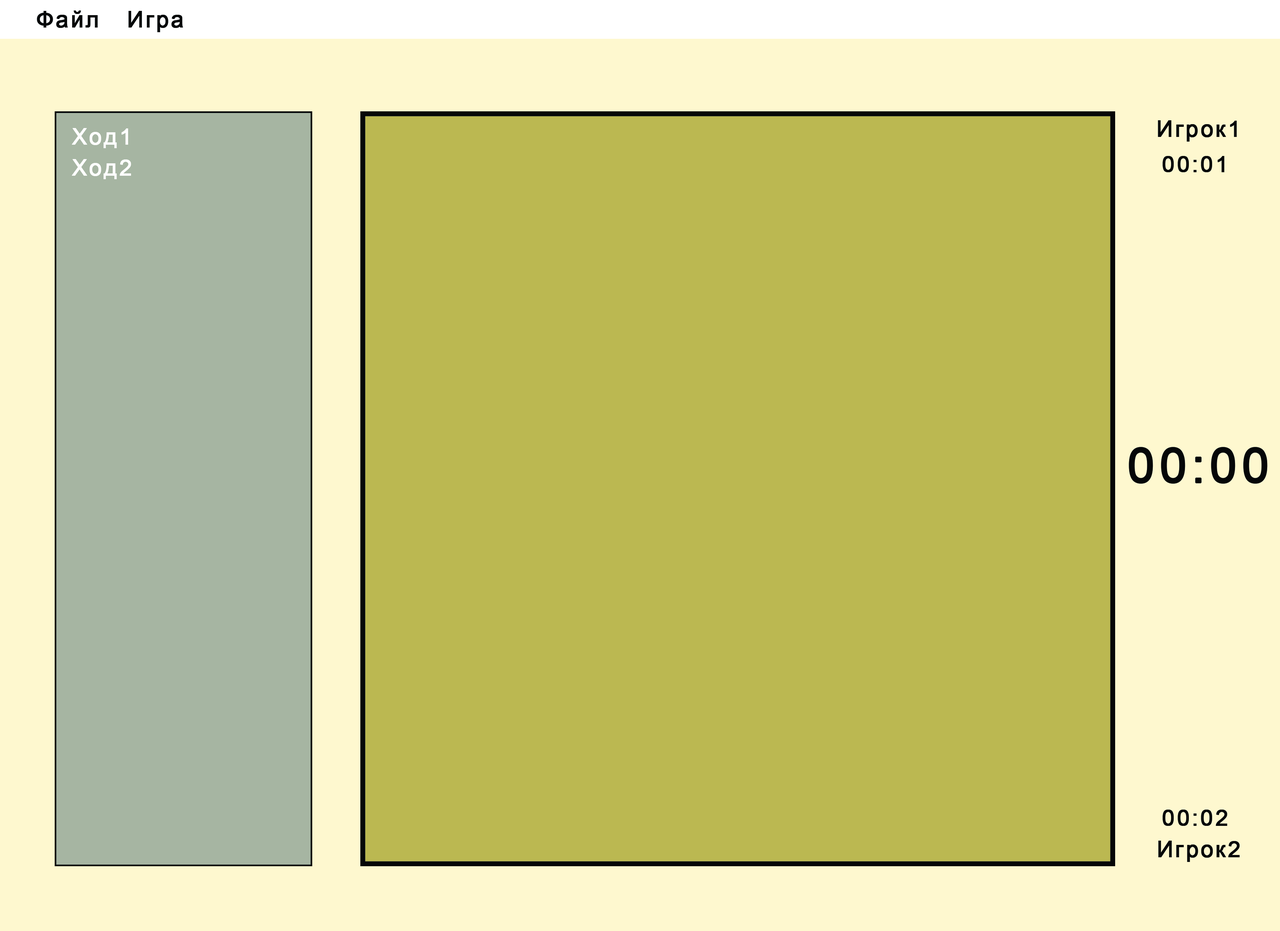
<style>
.page{position:relative;width:1280px;height:931px;background:#bbb851}
.page>*{position:absolute;margin:0}
.t1{font:22.6px "ArialMT";letter-spacing:0.075em;color:#050708;font-weight:bold}
.t2{font:22.6px "ArialMT";letter-spacing:0.075em;color:#ffffff;font-weight:bold}
.t3{font:48.5px "ArialMT";letter-spacing:0.075em;color:#050708;font-weight:bold}
</style>
<div class="page">
<p class="t1" style="left:37px;top:10px;width:146px;height:22px">Файл   Игра</p>
<p class="t1" style="left:1158px;top:120px;width:79px;height:22px">Игрок1</p>
<p class="t2" style="left:72px;top:128px;width:56px;height:20px">Ход1</p>
<p class="t2" style="left:72px;top:159px;width:59px;height:20px">Ход2</p>
<p class="t1" style="left:1163px;top:156px;width:62px;height:16px">00:01</p>
<p class="t3" style="left:1129px;top:447px;width:139px;height:37px">00:00</p>
<p class="t1" style="left:1163px;top:810px;width:65px;height:16px">00:02</p>
<p class="t1" style="left:1159px;top:841px;width:81px;height:21px">Игрок2</p>
</div>
